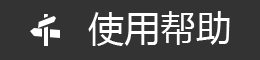
<style>
.page{position:relative;width:260px;height:60px;background:#333333}
.page>*{position:absolute;margin:0}
.t1{font:36px "MicrosoftYaHei";color:#ffffff}
</style>
<div class="page">
<p class="t1" style="left:88px;top:11px;width:142px;height:35px">使用帮助</p>
</div>
